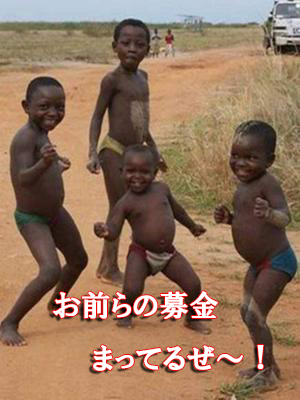
<style>
.page{position:relative;width:300px;height:400px}
.page>*{position:absolute;margin:0}
.t1{font:30px "HGPSoeiPresenceEB";color:#ffffff}
</style>
<div class="page">
<p class="t1" style="left:52px;top:291px;width:191px;height:80px">お前らの募金<br>　　まってるぜ～</p>
<p class="t1" style="left:257px;top:345px;width:7px;height:24px">！</p>
</div>
